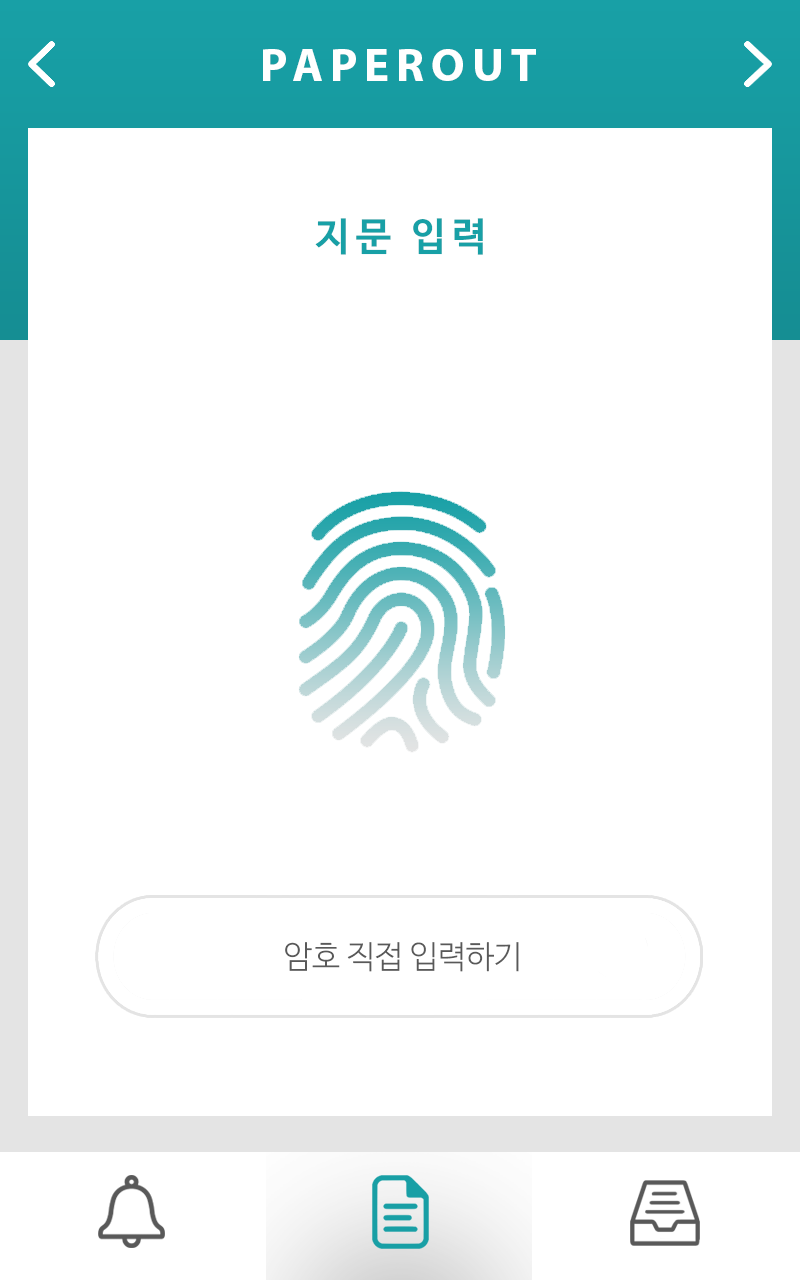
<style>
.page{position:relative;width:800px;height:1280px;background:#ffffff}
.page>*{position:absolute;margin:0}
.t1{font:46.9px "MyriadPro-Bold";letter-spacing:0.15em;color:#ffffff}
.t2{font:39px "NanumBarunGothicOTFBold";letter-spacing:0.15em;color:#18a0a6}
.t3{font:31.8px "NanumBarunGothicOTFLight";color:#595959}
</style>
<div class="page">
<p class="t1" style="left:263px;top:49px;width:273px;height:32px">PAPEROUT</p>
<p class="t2" style="left:315px;top:218px;width:168px;height:37px">지문 입력</p>
<p class="t3" style="left:285px;top:942px;width:234px;height:30px">암호 직접 입력하기</p>
</div>
